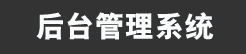
<style>
.page{position:relative;width:246px;height:54px;background:#333333}
.page>*{position:absolute;margin:0}
.t1{font:30px "HYb9gj";letter-spacing:0.02em;color:#fafbfc}
</style>
<div class="page">
<p class="t1" style="left:36px;top:12px;width:178px;height:28px">后台管理系统</p>
</div>
